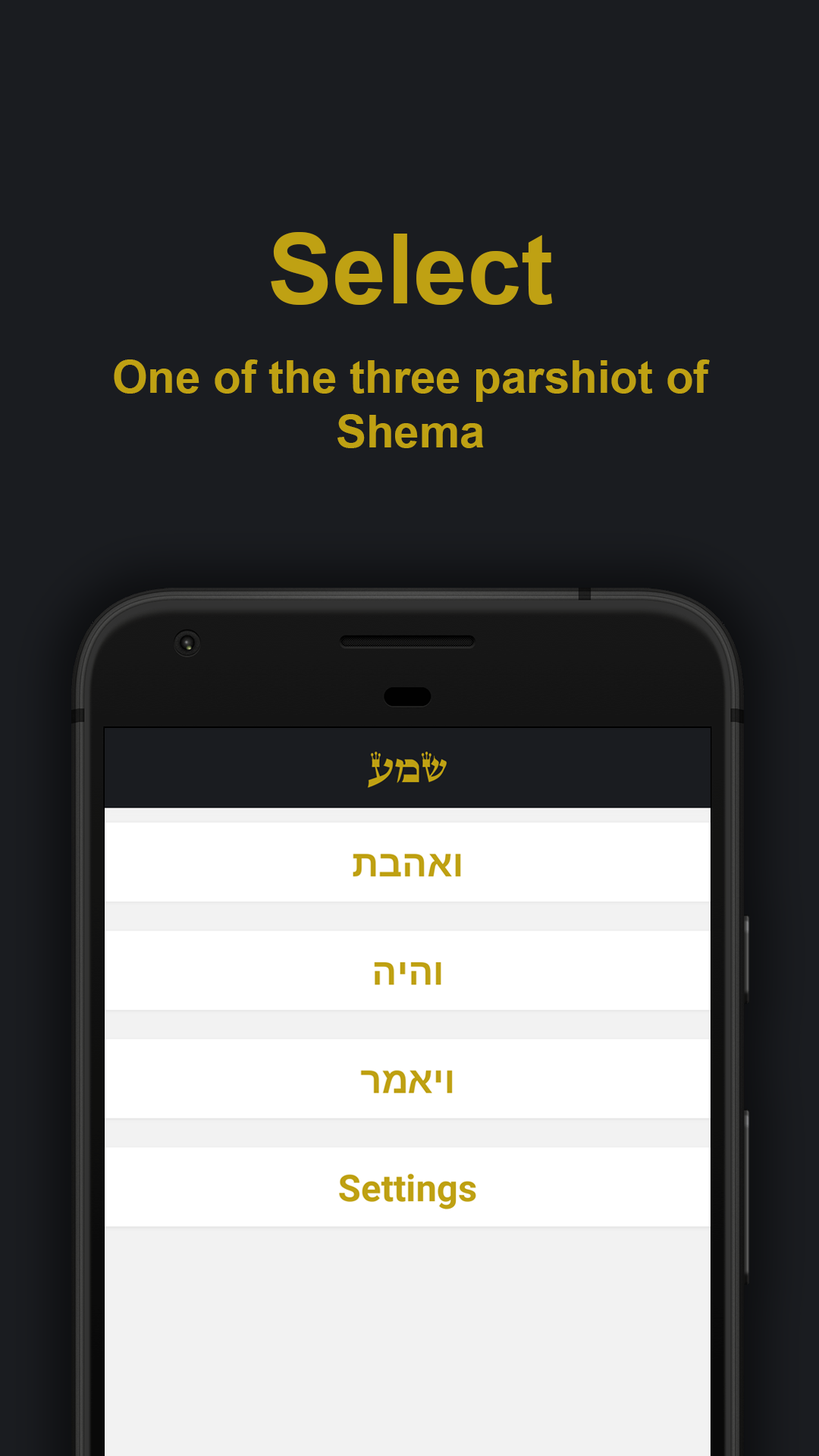
<style>
.page{position:relative;width:819px;height:1456px;background:#1a1c20}
.page>*{position:absolute;margin:0}
.t1{font:97.1px "Arial-BoldMT";color:#bfa113}
.t2{font:45.5px "Arial-BoldMT";color:#bfa113}
</style>
<div class="page">
<p class="t1" style="left:271px;top:232px;width:282px;height:73px">Select</p>
<p class="t2" style="left:114px;top:359px;width:596px;height:89px;text-align:center">One of the three parshiot of Shema</p>
</div>
